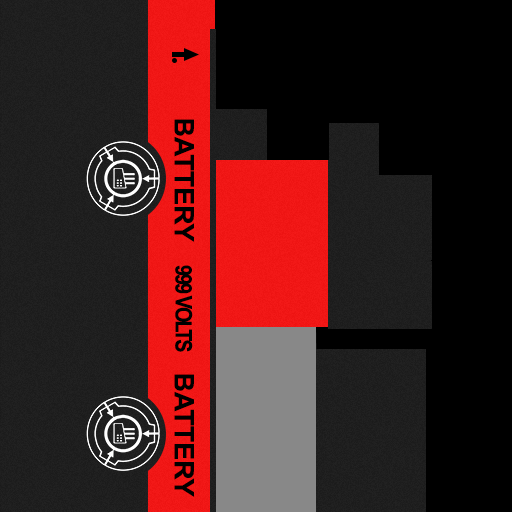
<style>
.page{position:relative;width:512px;height:512px;background:#000000}
.page>*{position:absolute;margin:0}
.t1{font:26.9px "Arial-BoldMT";color:#000000}
.t2{font:22.7px "Arial-BoldMT";letter-spacing:-0.1em;color:#000000;scale:0.87 1}
</style>
<div class="page">
<p class="t1" style="left:174px;top:119px;width:20px;height:123px;rotate:90deg">BATTERY</p>
<p class="t2" style="left:175px;top:265px;width:18px;height:87px;rotate:90deg">999 VOLTS</p>
<p class="t1" style="left:174px;top:374px;width:20px;height:123px;rotate:90deg">BATTERY</p>
</div>
